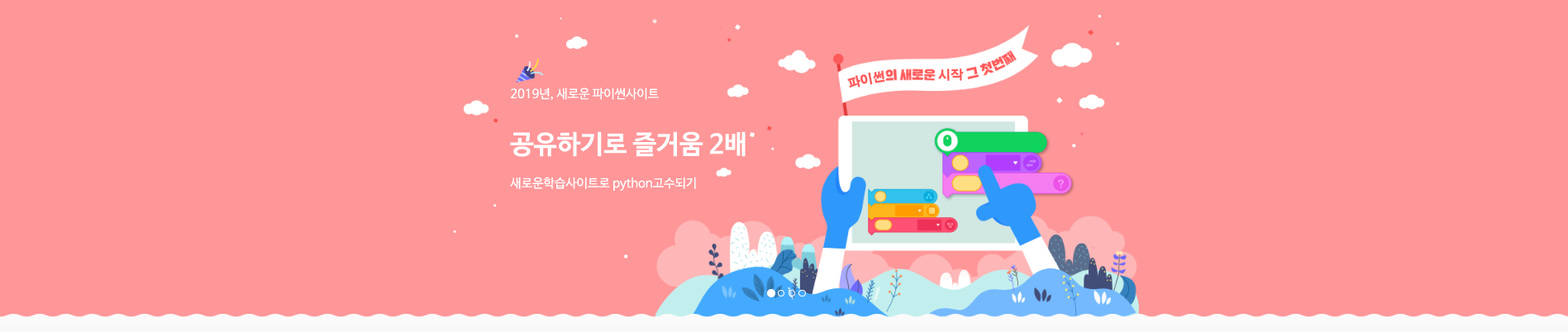
<style>
.page{position:relative;width:1568px;height:332px;background:#ff9698}
.page>*{position:absolute;margin:0}
.t1{font:12.4px "H2gtrE";color:#ff5b5b}
.t2{font:12.4px "NanumBarunGothic";color:#ffffff}
.t3{font:26.2px "NanumBarunGothicBold";color:#ffffff}
</style>
<div class="page">
<p class="t1" style="left:847px;top:70px;width:38px;height:18px;rotate:-12deg">파이썬</p>
<p class="t1" style="left:938px;top:69px;width:26px;height:12px;rotate:-1deg">시작</p>
<p class="t2" style="left:510px;top:88px;width:236px;height:103px">2019년, 새로운 파이썬사이트<br><br><span class="t3">공유하기로 즐거움 2배<br></span>새로운학습사이트로 python고수되기</p>
</div>
